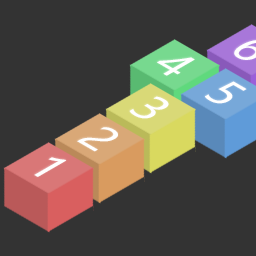
<style>
.page{position:relative;width:256px;height:256px;background:#333333}
.page>*{position:absolute;margin:0}
.t1{font:42.7px "MicrosoftYaHei";color:#ffffff}
</style>
<div class="page">
<p class="t1" style="left:157px;top:57px;width:38px;height:19px;rotate:30deg">4</p>
<p class="t1" style="left:205px;top:81px;width:42px;height:23px;rotate:30deg">5</p>
<p class="t1" style="left:129px;top:96px;width:40px;height:23px;rotate:30deg">3</p>
<p class="t1" style="left:77px;top:127px;width:41px;height:25px;rotate:30deg">2</p>
<p class="t1" style="left:34px;top:157px;width:33px;height:20px;rotate:30deg">1</p>
</div>
